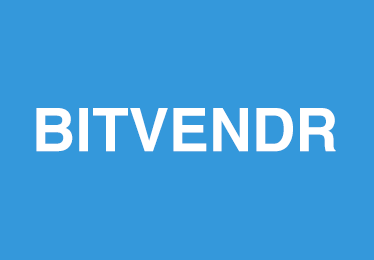
<style>
.page{position:relative;width:374px;height:260px;background:#3498db}
.page>*{position:absolute;margin:0}
.t1{font:60px "Helvetica-Bold";color:#ffffff}
</style>
<div class="page">
<p class="t1" style="left:36px;top:108px;width:300px;height:44px">BITVENDR</p>
</div>
